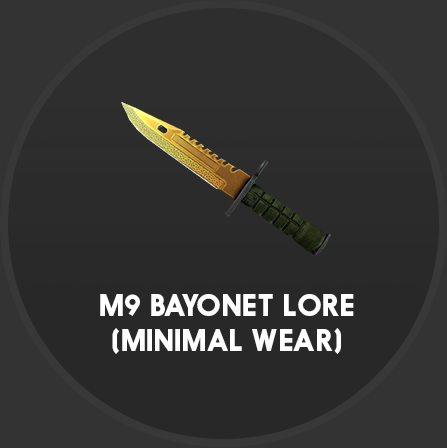
<style>
.page{position:relative;width:447px;height:448px;background:#333333}
.page>*{position:absolute;margin:0}
.t1{font:28.9px "Nanami-Bold";color:#ffffff}
</style>
<div class="page">
<p class="t1" style="left:100px;top:294px;width:254px;height:60px;text-align:center">M9 BAYONET LORE<br>(MINIMAL WEAR)</p>
</div>
